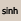
<style>
.page{position:relative;width:21px;height:21px;background:#d9cdc1}
.page>*{position:absolute;margin:0}
.t1{font:9px "Tahoma";color:#000000}
</style>
<div class="page">
<p class="t1" style="left:2px;top:7px;width:16px;height:8px">sinh</p>
</div>
